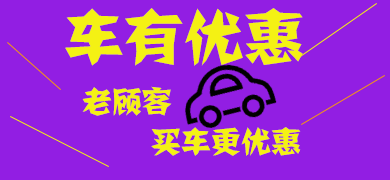
<style>
.page{position:relative;width:390px;height:180px;background:#921ee3}
.page>*{position:absolute;margin:0}
.t1{font:60px "FZJZJW--GB1-0";color:#f4f114}
.t2{font:30px "FZJZJW--GB1-0";color:#f4f114}
</style>
<div class="page">
<p class="t1" style="left:65px;top:8px;width:238px;height:58px">车有优惠</p>
<p class="t2" style="left:82px;top:86px;width:90px;height:30px">老顾客</p>
<p class="t2" style="left:151px;top:127px;width:150px;height:29px">买车更优惠</p>
</div>
